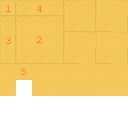
<style>
.page{position:relative;width:128px;height:128px;background:#ffffff}
.page>*{position:absolute;margin:0}
.t1{font:10px "CourierNewPSMT";letter-spacing:0.08em;color:#f68517;scale:1.15 1}
.t2{font:10px "CourierNewPSMT";letter-spacing:0.08em;color:#f28316;scale:1.15 1}
.t3{font:10px "CourierNewPSMT";letter-spacing:0.08em;color:#f77c0f;scale:1.15 1}
.t4{font:10px "CourierNewPSMT";letter-spacing:0.08em;scale:1.15 1}
</style>
<div class="page">
<p class="t1" style="left:6px;top:5px;width:5px;height:7px">1</p>
<p class="t1" style="left:37px;top:5px;width:5px;height:7px">4</p>
<p class="t2" style="left:6px;top:37px;width:5px;height:7px">3</p>
<p class="t3" style="left:36px;top:36px;width:6px;height:7px">2</p>
<p class="t4" style="left:21px;top:68px;width:5px;height:7px">5</p>
</div>
